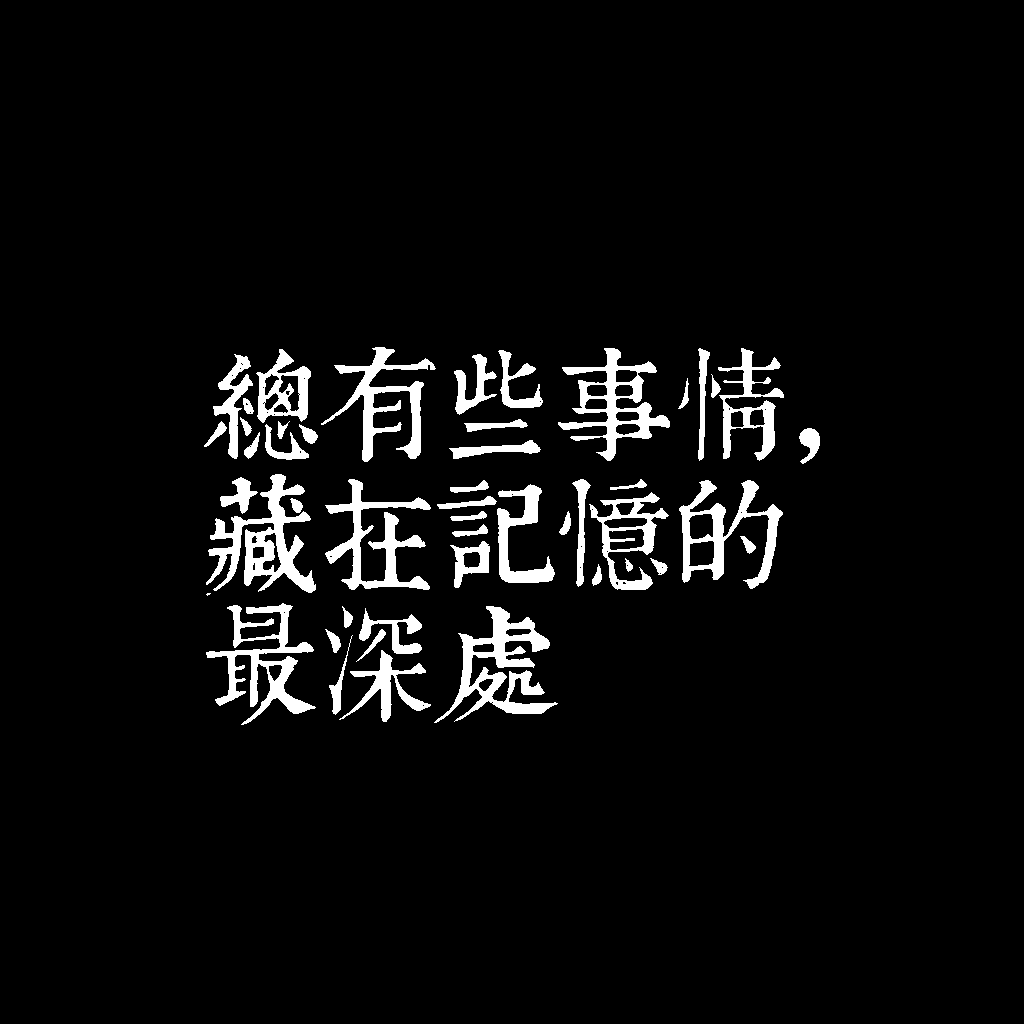
<style>
.page{position:relative;width:1024px;height:1024px;background:#000000}
.page>*{position:absolute;margin:0}
.t1{font:120px/130px "TpldKhangXiDictTrial";letter-spacing:-0.02em;color:#ffffff}
</style>
<div class="page">
<p class="t1" style="left:204px;top:347px;width:616px;height:378px">總有些事情，<br>藏在記憶的<br>最深處</p>
</div>
